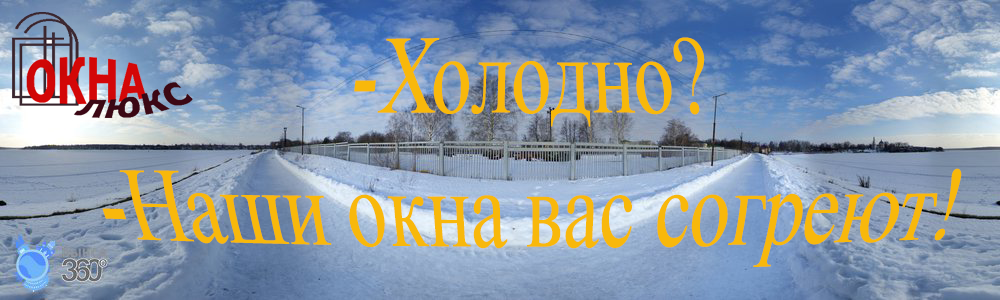
<style>
.page{position:relative;width:1000px;height:300px}
.page>*{position:absolute;margin:0}
.t1{font:102.2px "TimesNewRomanPSMT";color:#f8b80b;scale:0.74 1}
</style>
<div class="page">
<p class="t1" style="left:102px;top:37px;width:860px;height:230px;text-align:center">-Холодно?<br>-Наши окна вас согреют!</p>
</div>
